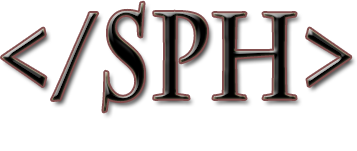
<style>
.page{position:relative;width:357px;height:151px;background:#ffffff}
.page>*{position:absolute;margin:0}
.t1{font:122.4px "CharlemagneStd-Bold";scale:0.76 1}
</style>
<div class="page">
<p class="t1" style="left:2px;top:2px;width:349px;height:110px">&lt;/SPH&gt;</p>
</div>
